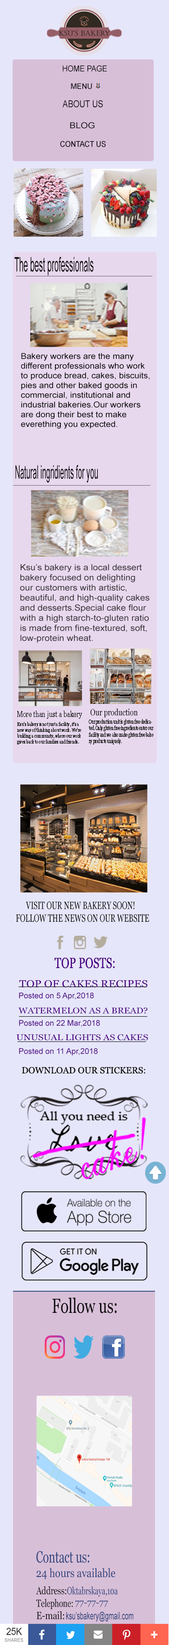
<style>
.page{position:relative;width:169px;height:1645px;background:#e6e6fa}
.page>*{position:absolute;margin:0}
.t1{font:8.3px "ArialMT";color:#050505;scale:0.91 1}
.t2{font:7.6px "ArialMT";color:#121212;scale:0.96 1}
.t3{font:9.5px "ArialMT";color:#050505;scale:0.84 1}
.t4{font:8.4px "ArialMT";color:#171717;scale:1.1 1}
.t5{font:8px "ArialMT";color:#080808;scale:0.9 1}
.t6{font:20.1px "ArialMT";color:#050505;scale:0.39 1}
.t7{font:8.1px "ArialMT";color:#050505;scale:1.07 1}
.t8{font:18.6px "ArialMT";color:#050505;scale:0.39 1}
.t9{font:8.4px "ArialMT";color:#343035;scale:1.08 1}
.t10{font:8px "Georgia";color:#020602;scale:0.77 1}
.t11{font:9px "Georgia";color:#020602;scale:0.77 1}
.t12{font:4.8px "Georgia";color:#020602;scale:0.78 1}
.t13{font:5.5px "Georgia";color:#020602;scale:0.63 1}
.t14{font:10.5px "Georgia";color:#060606;text-transform:uppercase;scale:0.67 1}
.t15{font:14.6px "Georgia";color:#4b0082;text-transform:uppercase;scale:0.74 1}
.t16{font:10.1px "Georgia";color:#4b0082;scale:1.11 1}
.t17{font:7.9px "ArialMT";color:#4b0082}
.t18{font:7.9px "Gabriola";color:#4b0082}
.t19{font:8.4px "Georgia";color:#4b0082;scale:1.11 1}
.t20{font:8.4px "Georgia";color:#4b0082;scale:1.14 1}
.t21{font:9px "Georgia";color:#060606;text-transform:uppercase}
.t22{font:20.3px "Georgia";color:#080809;scale:0.72 1}
.t23{font:16.2px "Georgia";color:#33467d;scale:0.67 1}
.t24{font:11.7px "Georgia";color:#33467d;scale:0.84 1}
.t25{font:10.4px "Georgia";color:#050505;scale:0.76 1}
.t26{font:10.4px "Georgia";color:#33467d;scale:0.66 1}
.t27{font:10.4px "Georgia";color:#050505;scale:0.72 1}
.t28{font:9px "Georgia";color:#33467d}
.t29{font:10.4px "Georgia";color:#050505;scale:0.84 1}
.t30{font:10.4px "ArialMT";color:#33467d;scale:0.6 1}
</style>
<div class="page">
<p class="t1" style="left:63px;top:65px;width:44px;height:7px">HOME PAGE</p>
<p class="t2" style="left:71px;top:83px;width:21px;height:6px">MENU</p>
<p class="t3" style="left:63px;top:100px;width:40px;height:8px">ABOUT US</p>
<p class="t4" style="left:70px;top:122px;width:25px;height:7px">BLOG</p>
<p class="t5" style="left:60px;top:141px;width:46px;height:6px">CONTACT US</p>
<p class="t6" style="left:14px;top:257px;width:80px;height:18px">The best professionals</p>
<p class="t7" style="left:21px;top:353px;width:128px;height:76px">Bakery workers are the many <br>different professionals who work <br>to produce bread, cakes, biscuits, <br>pies and other baked goods in <br>commercial, institutional and<br>industrial bakeries.Our workers <br>are dong their best to make <br>everething you expected.</p>
<p class="t8" style="left:15px;top:465px;width:83px;height:18px">Natural ingridients for you</p>
<p class="t9" style="left:20px;top:564px;width:129px;height:79px">Ksu’s bakery is a local dessert<br>bakery focused on delighting <br>our customers with artistic, <br>beautiful, and high-quality cakes<br>and desserts.Special cake flour <br>with a high starch-to-gluten ratio<br>is made from fine-textured, soft, <br>low-protein wheat.</p>
<p class="t10" style="left:17px;top:711px;width:65px;height:8px">More than just a bakery</p>
<p class="t11" style="left:90px;top:708px;width:48px;height:9px">Our production</p>
<p class="t12" style="left:17px;top:722px;width:64px;height:22px">Ksu’s bakery is not just a facility, it’s a <br>new way of thinking about work. We’re<br>building a community, where our work<br>gives back to our families and friends.</p>
<p class="t13" style="left:89px;top:719px;width:64px;height:25px">Our production unit is gluten free dedica-<br>ted. Only gluten free ingredients enter our <br>facility and we  also make gluten free bake-<br>ry products uniquely.</p>
<p class="t14" style="left:16px;top:901px;width:133px;height:21px">Visit our new bakery soon!<br>Follow the news on our website</p>
<p class="t15" style="left:54px;top:957px;width:61px;height:11px">TOP POSTS:</p>
<p class="t16" style="left:19px;top:980px;width:128px;height:7px">TOP OF CAKES RECIPES</p>
<p class="t17" style="left:19px;top:992px;width:75px;height:8px"><span class="t18"><br></span>Posted on 5 Apr,2018</p>
<p class="t19" style="left:18px;top:1007px;width:129px;height:6px">WATERMELON AS A BREAD?</p>
<p class="t17" style="left:19px;top:1020px;width:81px;height:7px"><span class="t18"><br></span>Posted on 22 Mar,2018</p>
<p class="t20" style="left:16px;top:1034px;width:132px;height:6px">UNUSUAL LIGHTS AS CAKES</p>
<p class="t17" style="left:19px;top:1048px;width:79px;height:7px"><span class="t18"><br></span>Posted on 11 Apr,2018</p>
<p class="t21" style="left:22px;top:1067px;width:123px;height:7px">Download our stickers:</p>
<p class="t22" style="left:52px;top:1297px;width:65px;height:16px">Follow us:</p>
<p class="t23" style="left:36px;top:1551px;width:53px;height:12px">Contact us:</p>
<p class="t24" style="left:36px;top:1568px;width:79px;height:11px">24 hours available</p>
<p class="t25" style="left:36px;top:1586px;width:30px;height:8px">Address:</p>
<p class="t26" style="left:67px;top:1586px;width:51px;height:11px">Oktabrskaya,10a</p>
<p class="t27" style="left:36px;top:1598px;width:37px;height:11px">Telephone:</p>
<p class="t28" style="left:75px;top:1600px;width:33px;height:7px">77-77-77</p>
<p class="t29" style="left:36px;top:1611px;width:28px;height:8px">E-mail:</p>
<p class="t30" style="left:66px;top:1611px;width:67px;height:10px">ksu’sbakery@gmail.com</p>
</div>
